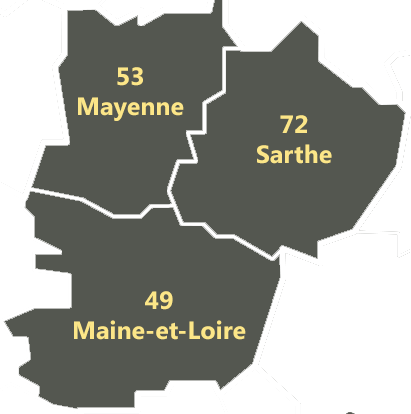
<style>
.page{position:relative;width:411px;height:414px;background:#545750}
.page>*{position:absolute;margin:0}
.t1{font:25px "SegoeUI-Bold";color:#fce688}
</style>
<div class="page">
<p class="t1" style="left:78px;top:67px;width:106px;height:54px;text-align:center">53<br>Mayenne</p>
<p class="t1" style="left:257px;top:115px;width:75px;height:49px;text-align:center">72<br>Sarthe</p>
<p class="t1" style="left:74px;top:291px;width:172px;height:49px;text-align:center">49<br>Maine-et-Loire</p>
</div>
